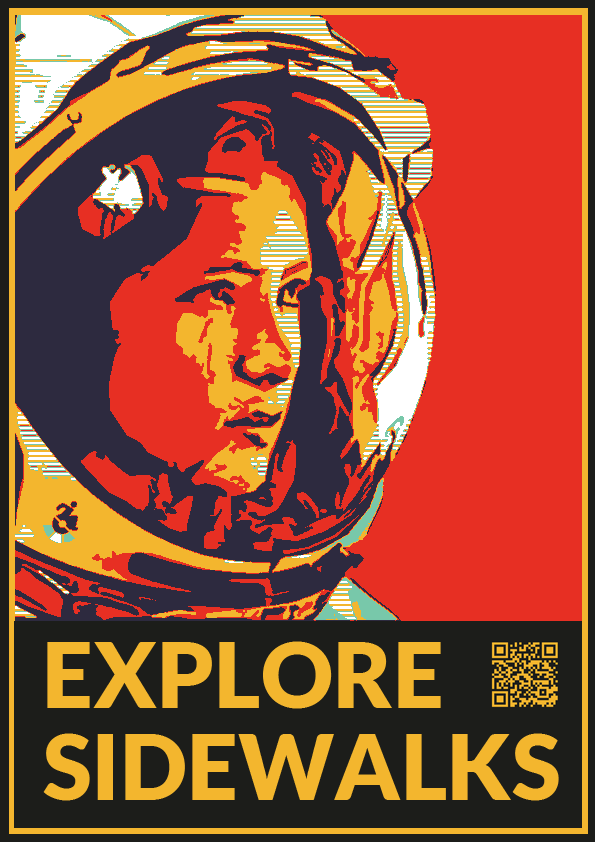
<style>
.page{position:relative;width:595px;height:842px;background:#e72f23}
.page>*{position:absolute;margin:0}
.t1{font:90px "Lato-Black";color:#f3b62e}
</style>
<div class="page">
<p class="t1" style="left:47px;top:641px;width:394px;height:68px">EXPLORE</p>
<p class="t1" style="left:43px;top:733px;width:516px;height:68px">SIDEWALKS</p>
</div>
